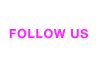
<style>
.page{position:relative;width:96px;height:65px;background:#ffffff}
.page>*{position:absolute;margin:0}
.t1{font:12.5px "HelveticaNeue-Bold";letter-spacing:0.05em;color:#fe22fd}
</style>
<div class="page">
<p class="t1" style="left:9px;top:28px;width:79px;height:11px">FOLLOW US</p>
</div>
